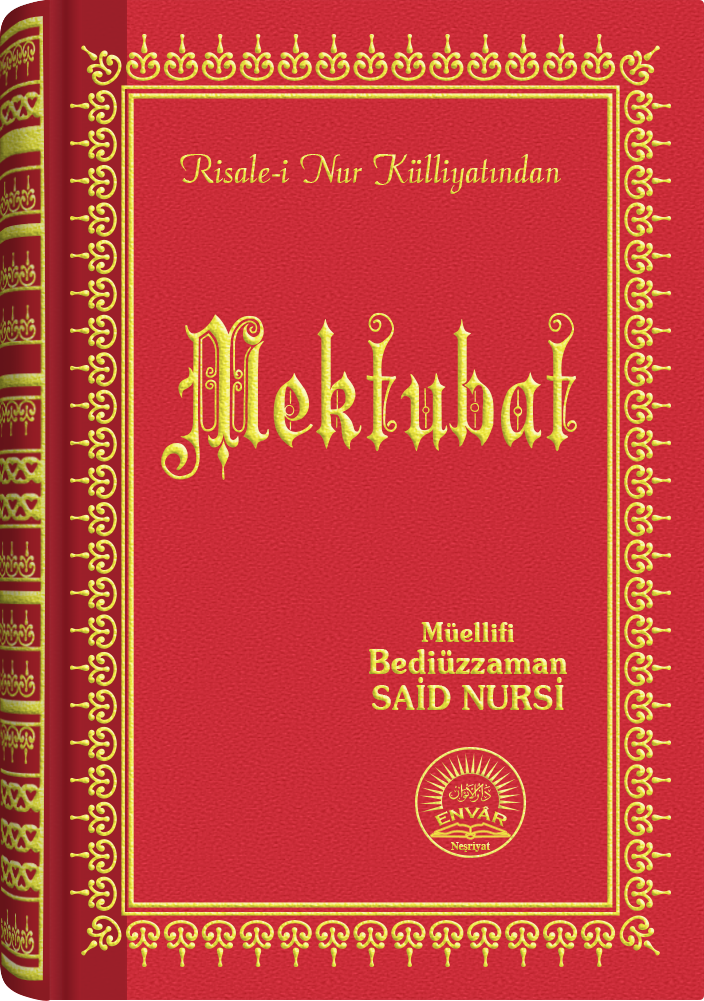
<style>
.page{position:relative;width:704px;height:1001px}
.page>*{position:absolute;margin:0}
.t1{font:45.3px "Barla © 072 Aria ScriptScriptSSi";scale:0.94 1}
.t2{font:169px "Barla © 001 Liva Nur";letter-spacing:-0.001em;scale:0.93 1}
.t3{font:33.4px/32.4px "SouvenirITCbyBT-Demi";scale:0.93 1}
.t4{font:27.4px/24.4px "SouvenirITCbyBT-Demi";scale:0.93 1}
.t5{font:33.4px/36.4px "SouvenirITCbyBT-Demi";scale:0.93 1}
.t6{font:15.6px "CopperplateGothic-Bold"}
.t7{font:11.2px "Times-Bold";scale:0.96 1}
</style>
<div class="page">
<p class="t1" style="left:180px;top:154px;width:381px;height:40px">Risale-i Nur Külliyatından</p>
<p class="t2" style="left:161px;top:312px;width:416px;height:168px">Mektubat</p>
<p class="t3" style="left:369px;top:622px;width:198px;height:88px;text-align:center"><span class="t4">Müellifi<br></span>Bediüzzaman<br><span class="t5">SAİD NURSİ</span></p>
<p class="t6" style="left:434px;top:806px;width:73px;height:21px">ENVÂR</p>
<p class="t7" style="left:451px;top:842px;width:39px;height:10px">Neşriyat</p>
</div>
